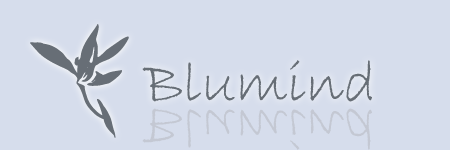
<style>
.page{position:relative;width:450px;height:150px;background:#d6ddec}
.page>*{position:absolute;margin:0}
.t1{font:60px "BradleyHandITC";color:#676e76}
.t2{font:60px "BradleyHandITC";color:#c4c8d3}
</style>
<div class="page">
<p class="t1" style="left:142px;top:60px;width:230px;height:42px">Blumind</p>
<p class="t2" style="left:142px;top:108px;width:230px;height:42px">Blumind</p>
</div>
